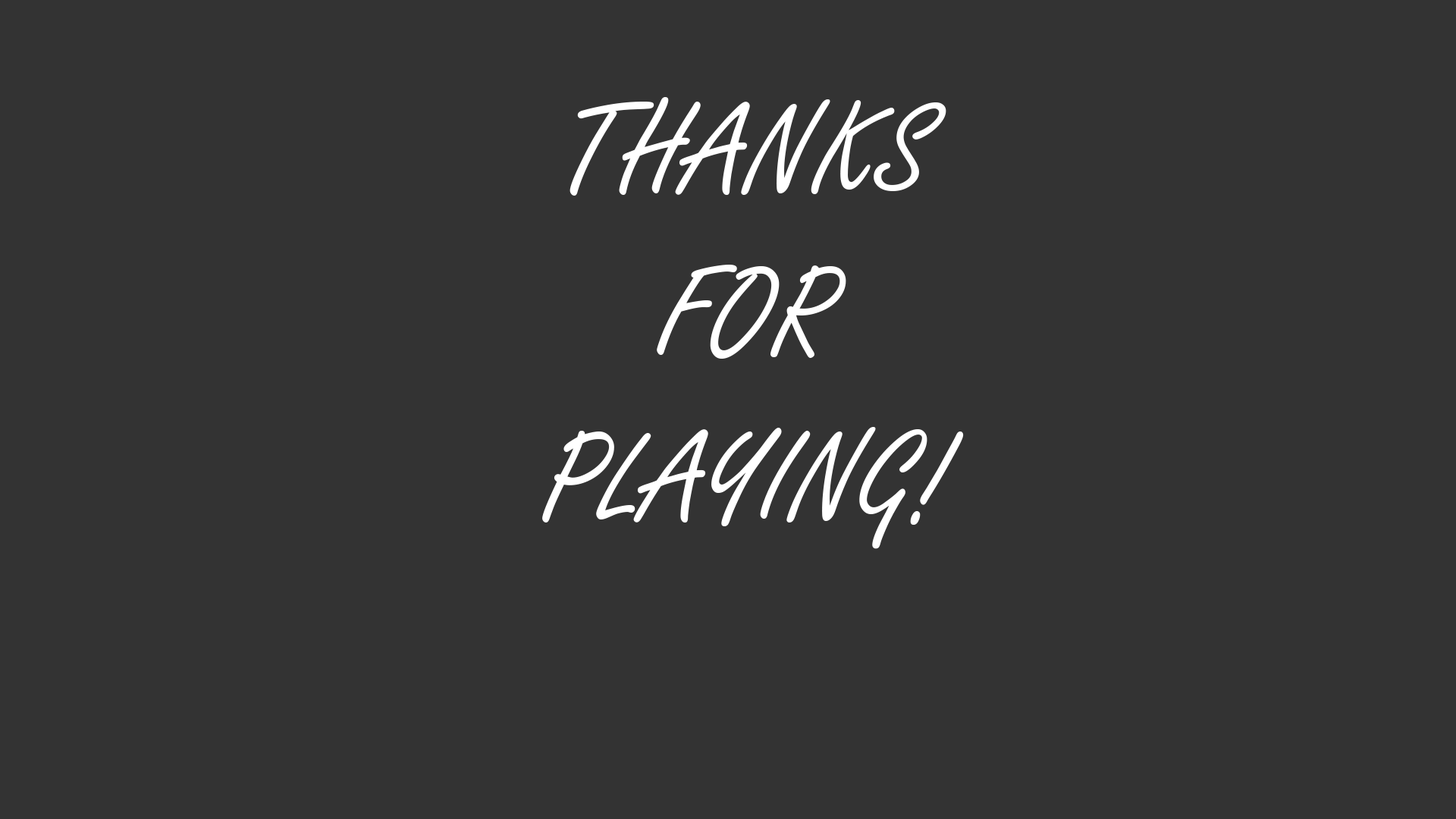
<style>
.page{position:relative;width:1456px;height:819px;background:#333333}
.page>*{position:absolute;margin:0}
.t1{font:136.5px "FreestyleScript-Regular";color:#ffffff;text-transform:uppercase}
</style>
<div class="page">
<p class="t1" style="left:542px;top:97px;width:422px;height:452px;text-align:center">Thanks<br>For <br>Playing!</p>
</div>
